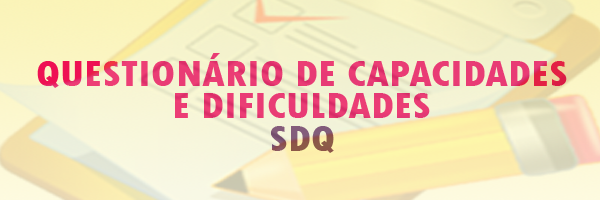
<style>
.page{position:relative;width:600px;height:200px}
.page>*{position:absolute;margin:0}
.t1{font:38.7px/32.6px "TwCenMT-CondensedExtraBold";color:#e93c75;scale:1.12 1}
</style>
<div class="page">
<p class="t1" style="left:37px;top:53px;width:530px;height:100px;text-align:center">QUESTIONÁRIO DE CAPACIDADES<br>E DIFICULDADES<br>SDQ</p>
</div>
